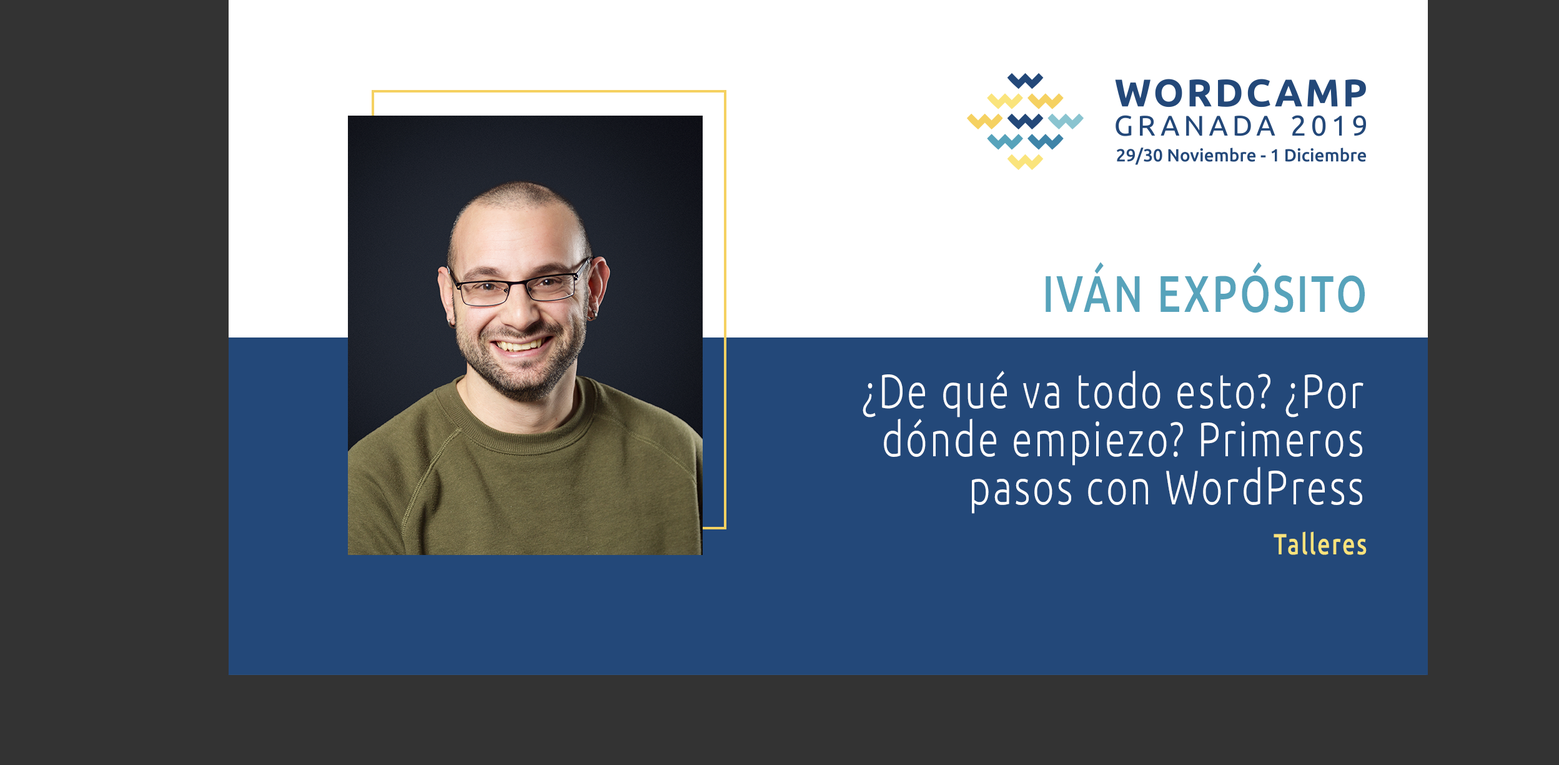
<style>
.page{position:relative;width:1559px;height:765px;background:#333333}
.page>*{position:absolute;margin:0}
.t1{font:51.4px "Ubuntu-Medium";letter-spacing:0.068em;color:#57a3bb;text-transform:uppercase;scale:0.77 1}
.t2{font:48.2px/48.2px "Ubuntu-Light";letter-spacing:0.068em;color:#ffffff;scale:0.77 1}
.t3{font:29.2px "Ubuntu-Medium";letter-spacing:0.068em;color:#f9e37b;scale:0.77 1}
</style>
<div class="page">
<p class="t1" style="left:1046px;top:262px;width:319px;height:51px">Iván Expósito</p>
<p class="t2" style="left:863px;top:370px;width:501px;height:144px;text-align:right">¿De qué va todo esto? ¿Por dónde empiezo? Primeros pasos con WordPress</p>
<p class="t3" style="left:1274px;top:531px;width:93px;height:24px">Talleres</p>
</div>
